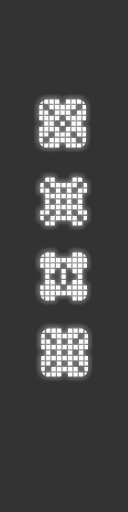
<style>
.page{position:relative;width:128px;height:512px;background:#333333}
.page>*{position:absolute;margin:0}
.t1{font:48px "Tile-Things";color:#ffffff}
</style>
<div class="page">
<p class="t1" style="left:39px;top:99px;width:47px;height:49px">u</p>
<p class="t1" style="left:40px;top:177px;width:47px;height:49px">l</p>
<p class="t1" style="left:40px;top:252px;width:47px;height:49px">x</p>
<p class="t1" style="left:41px;top:328px;width:47px;height:49px">m</p>
</div>
